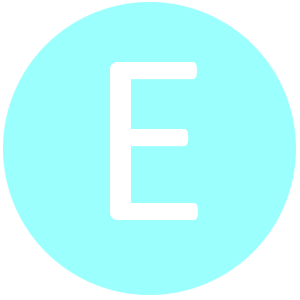
<style>
.page{position:relative;width:300px;height:300px;background:#9bfffe}
.page>*{position:absolute;margin:0}
.t1{font:250px "Calibri";color:#ffffff}
</style>
<div class="page">
<p class="t1" style="left:110px;top:62px;width:88px;height:158px">E</p>
</div>
